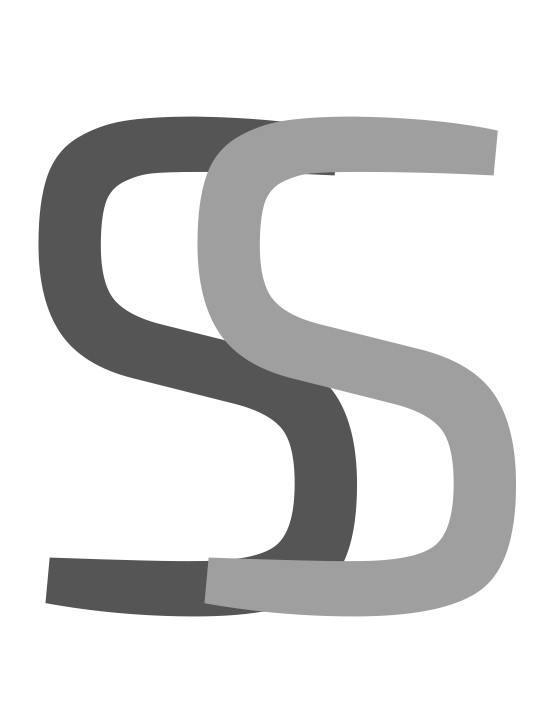
<style>
.page{position:relative;width:540px;height:702px;background:#ffffff}
.page>*{position:absolute;margin:0}
.t1{font:700px "Exo2-Regular";color:#555555}
.t2{font:700px "Exo2-Regular";color:#9f9f9f}
</style>
<div class="page">
<p class="t1" style="left:38px;top:116px;width:319px;height:501px">S</p>
<p class="t2" style="left:197px;top:116px;width:319px;height:501px">S</p>
</div>
